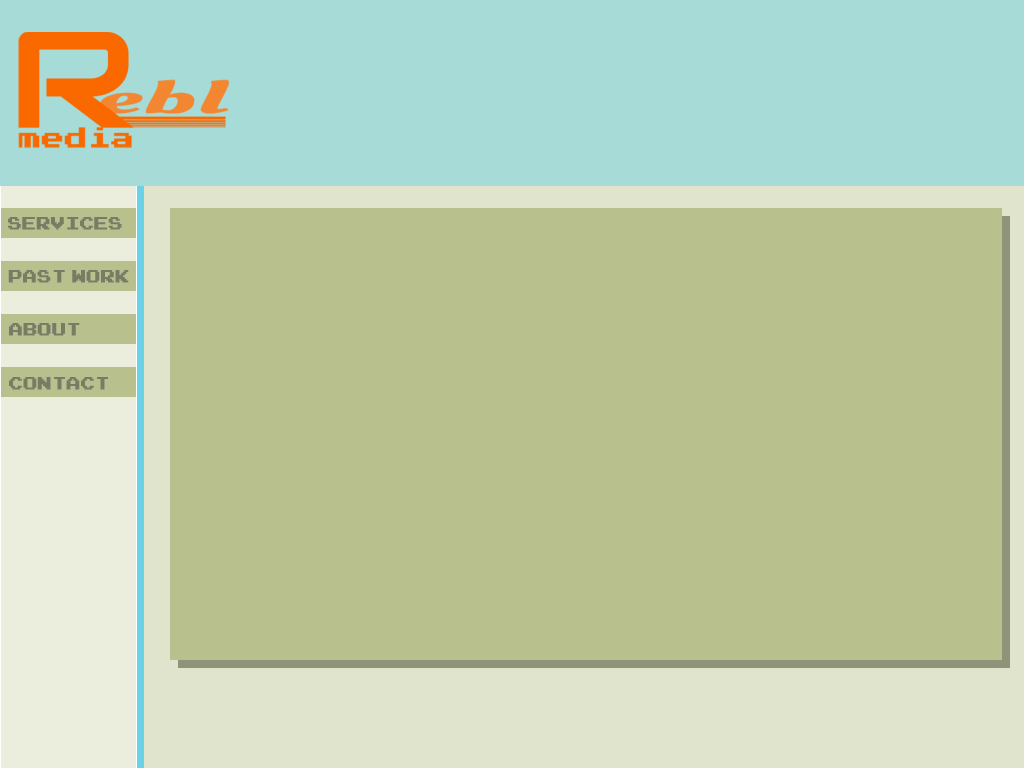
<style>
.page{position:relative;width:1024px;height:768px;background:#b8c08e}
.page>*{position:absolute;margin:0}
.t1{font:14px "PressStart2P-Regular";color:#797c65;font-weight:bold}
</style>
<div class="page">
<p class="t1" style="left:8px;top:217px;width:114px;height:13px">SERVICES</p>
<p class="t1" style="left:8px;top:270px;width:57px;height:13px">PAST</p>
<p class="t1" style="left:72px;top:270px;width:57px;height:13px">WORK</p>
<p class="t1" style="left:9px;top:323px;width:71px;height:13px">ABOUT</p>
<p class="t1" style="left:9px;top:377px;width:99px;height:13px">CONTACT</p>
</div>
